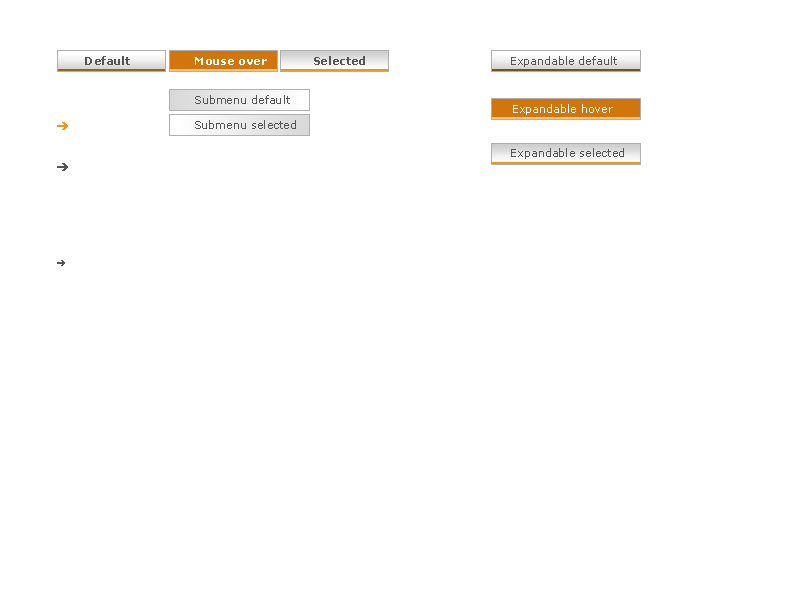
<style>
.page{position:relative;width:800px;height:600px;background:#ffffff}
.page>*{position:absolute;margin:0}
.t1{font:11px "Verdana-Bold";letter-spacing:0.01em;color:#555555}
.t2{font:11px "Verdana-Bold";letter-spacing:0.01em;color:#ffffff}
.t3{font:11px "Verdana";letter-spacing:0.01em;color:#555555}
.t4{font:11px "Verdana";letter-spacing:0.01em;color:#ffffff}
</style>
<div class="page">
<p class="t1" style="left:85px;top:56px;width:45px;height:9px">Default</p>
<p class="t2" style="left:195px;top:57px;width:72px;height:8px">Mouse over</p>
<p class="t1" style="left:314px;top:56px;width:51px;height:9px">Selected</p>
<p class="t3" style="left:511px;top:56px;width:106px;height:11px">Expandable default</p>
<p class="t3" style="left:195px;top:95px;width:95px;height:9px">Submenu default</p>
<p class="t4" style="left:513px;top:104px;width:100px;height:11px">Expandable hover</p>
<p class="t3" style="left:195px;top:120px;width:101px;height:9px">Submenu selected</p>
<p class="t3" style="left:511px;top:148px;width:113px;height:11px">Expandable selected</p>
</div>
